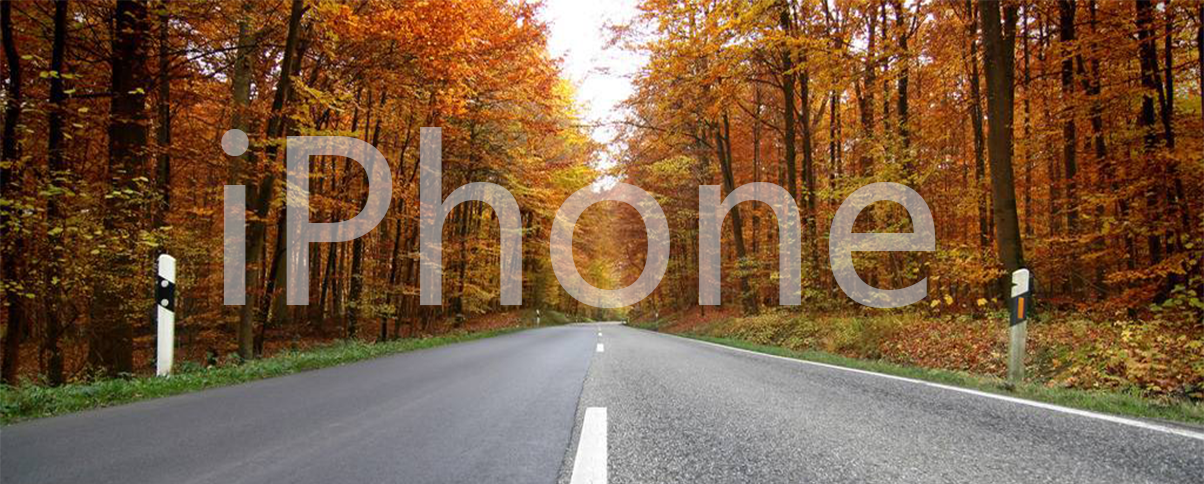
<style>
.page{position:relative;width:1204px;height:484px}
.page>*{position:absolute;margin:0}
.t1{font:223.1px "MicrosoftYaHei"}
</style>
<div class="page">
<p class="t1" style="left:221px;top:127px;width:715px;height:181px">iPhone</p>
</div>
